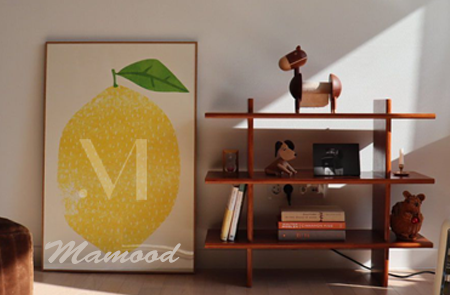
<style>
.page{position:relative;width:450px;height:295px}
.page>*{position:absolute;margin:0}
.t1{font:31.8px "BrushScriptStd";color:#c5b9ae;scale:1.17 1}
</style>
<div class="page">
<p class="t1" style="left:44px;top:240px;width:137px;height:24px">Mamood</p>
</div>
